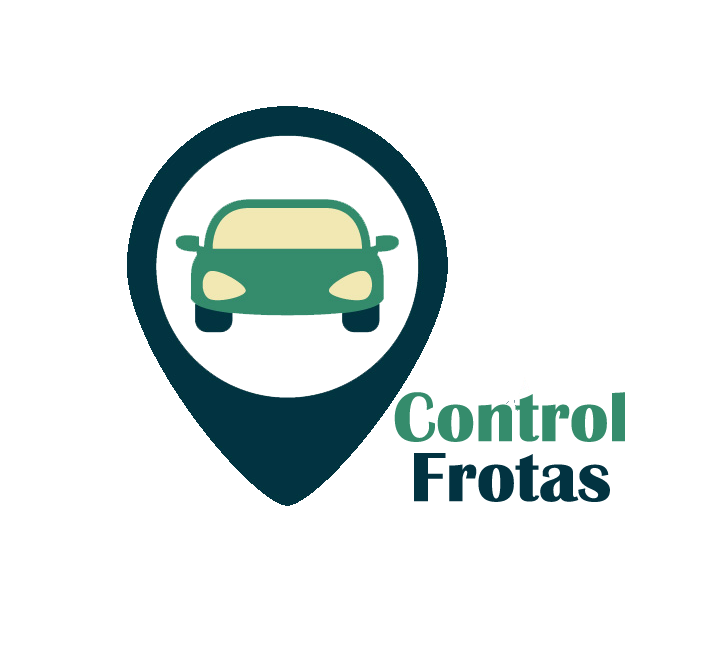
<style>
.page{position:relative;width:724px;height:666px;background:#ffffff}
.page>*{position:absolute;margin:0}
.t1{font:72px/60px "BritannicBold";color:#358c6c}
.t2{font:72px/60px "BritannicBold";color:#023341}
</style>
<div class="page">
<p class="t1" style="left:394px;top:392px;width:231px;height:110px;text-align:center">Control<br><span class="t2">Frotas</span></p>
</div>
